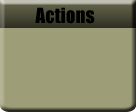
<style>
.page{position:relative;width:136px;height:112px;background:#9d9d77}
.page>*{position:absolute;margin:0}
.t1{font:19.2px "Impact";color:#000000}
</style>
<div class="page">
<p class="t1" style="left:35px;top:7px;width:60px;height:17px">Actions</p>
</div>
